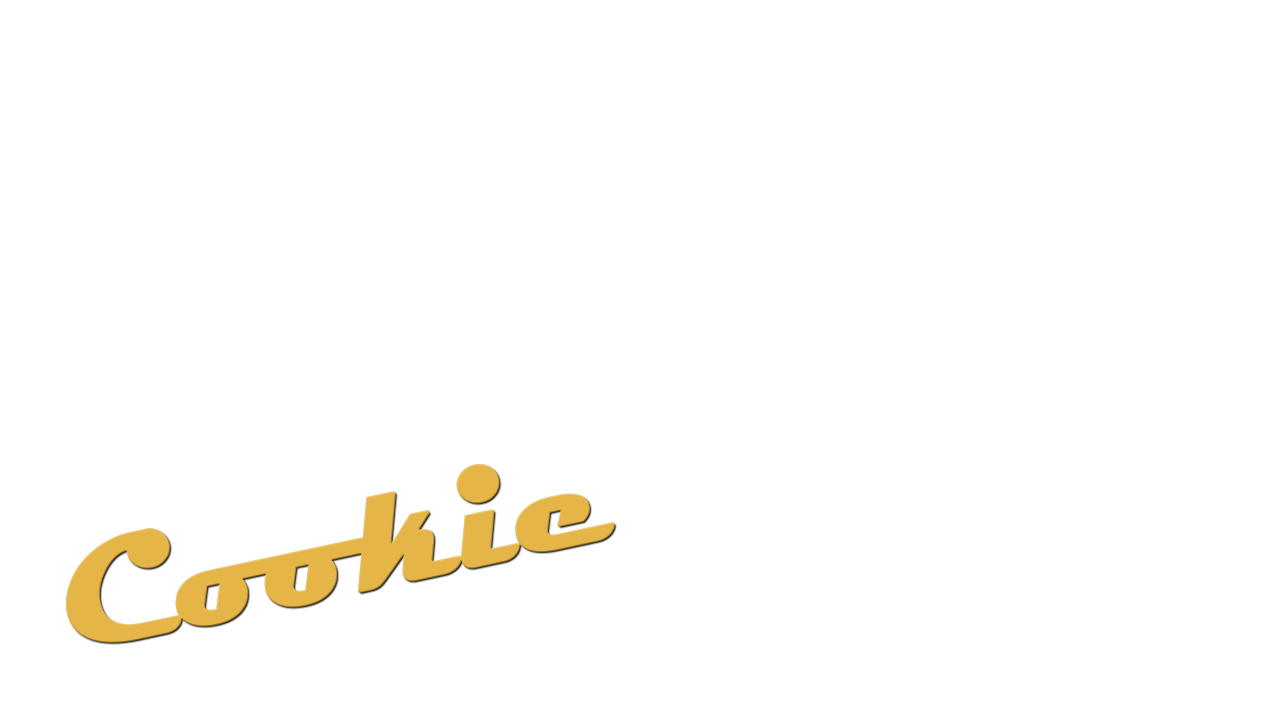
<style>
.page{position:relative;width:1280px;height:720px;background:#ffffff}
.page>*{position:absolute;margin:0}
.t1{font:150px "Magneto-Bold";color:#e5b647;font-weight:bold}
</style>
<div class="page">
<p class="t1" style="left:65px;top:464px;width:550px;height:179px;rotate:-12deg">Cookie</p>
</div>
